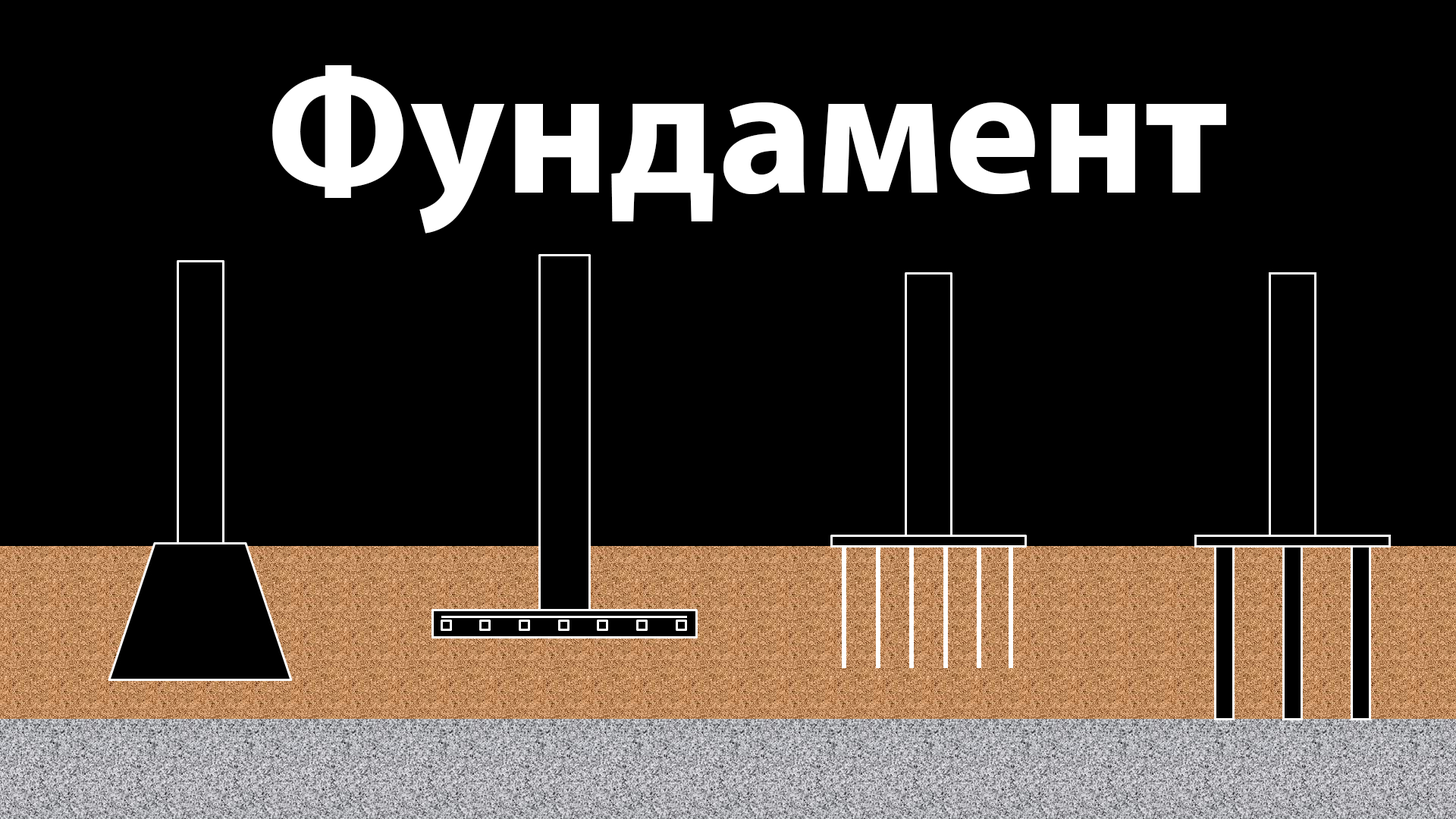
<style>
.page{position:relative;width:1456px;height:819px;background:#000000}
.page>*{position:absolute;margin:0}
.t1{font:182px "MyriadPro-Bold";color:#ffffff}
</style>
<div class="page">
<p class="t1" style="left:272px;top:65px;width:954px;height:169px">Фундамент</p>
</div>
